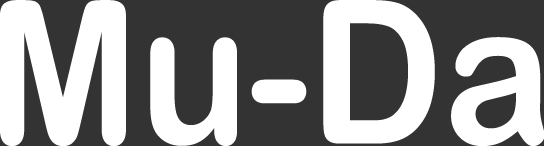
<style>
.page{position:relative;width:544px;height:146px;background:#333333}
.page>*{position:absolute;margin:0}
.t1{font:200px "ArialRoundedMTBold";color:#ffffff;scale:0.91 1}
</style>
<div class="page">
<p class="t1" style="left:0px;top:0px;width:545px;height:146px">Mu-Da</p>
</div>
